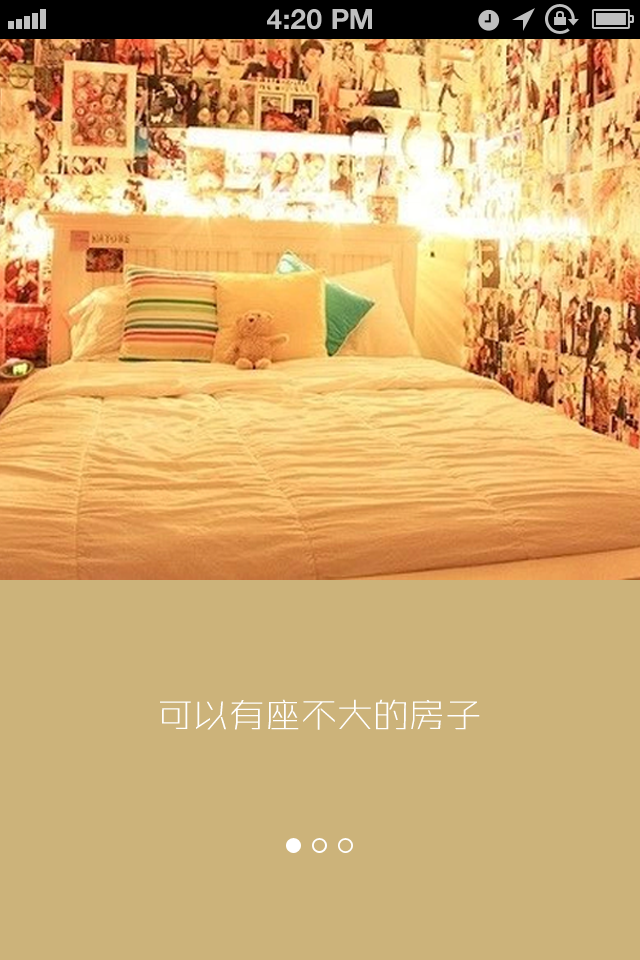
<style>
.page{position:relative;width:640px;height:960px;background:#ccb37a}
.page>*{position:absolute;margin:0}
.t1{font:28px "HelveticaNeue-Bold";color:#bfbfbf;text-transform:uppercase}
.t2{font:36px "ZHSRXT--GBK1-0";color:#ffffff}
</style>
<div class="page">
<p class="t1" style="left:267px;top:9px;width:105px;height:21px">4:20 PM</p>
<p class="t2" style="left:160px;top:699px;width:320px;height:31px">可以有座不大的房子</p>
</div>
